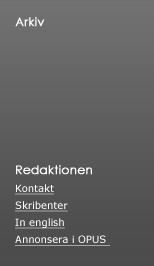
<style>
.page{position:relative;width:154px;height:266px}
.page>*{position:absolute;margin:0}
.t1{font:12px "CenturyGothic";color:#ffffff;font-weight:bold}
.t2{font:10px/17px "Verdana";color:#ffffff;text-decoration:underline}
.t3{font:12px/18px "CenturyGothic";color:#ffffff;font-weight:bold}
.t4{font:10px/18px "Verdana";color:#ffffff;text-decoration:underline}
</style>
<div class="page">
<p class="t1" style="left:15px;top:17px;width:30px;height:10px">Arkiv</p>
<p class="t2" style="left:15px;top:165px;width:95px;height:81px"><span class="t3">Redaktionen<br></span><span class="t4">Kontakt<br></span>Skribenter<br>In english<br>Annonsera i OPUS</p>
</div>
